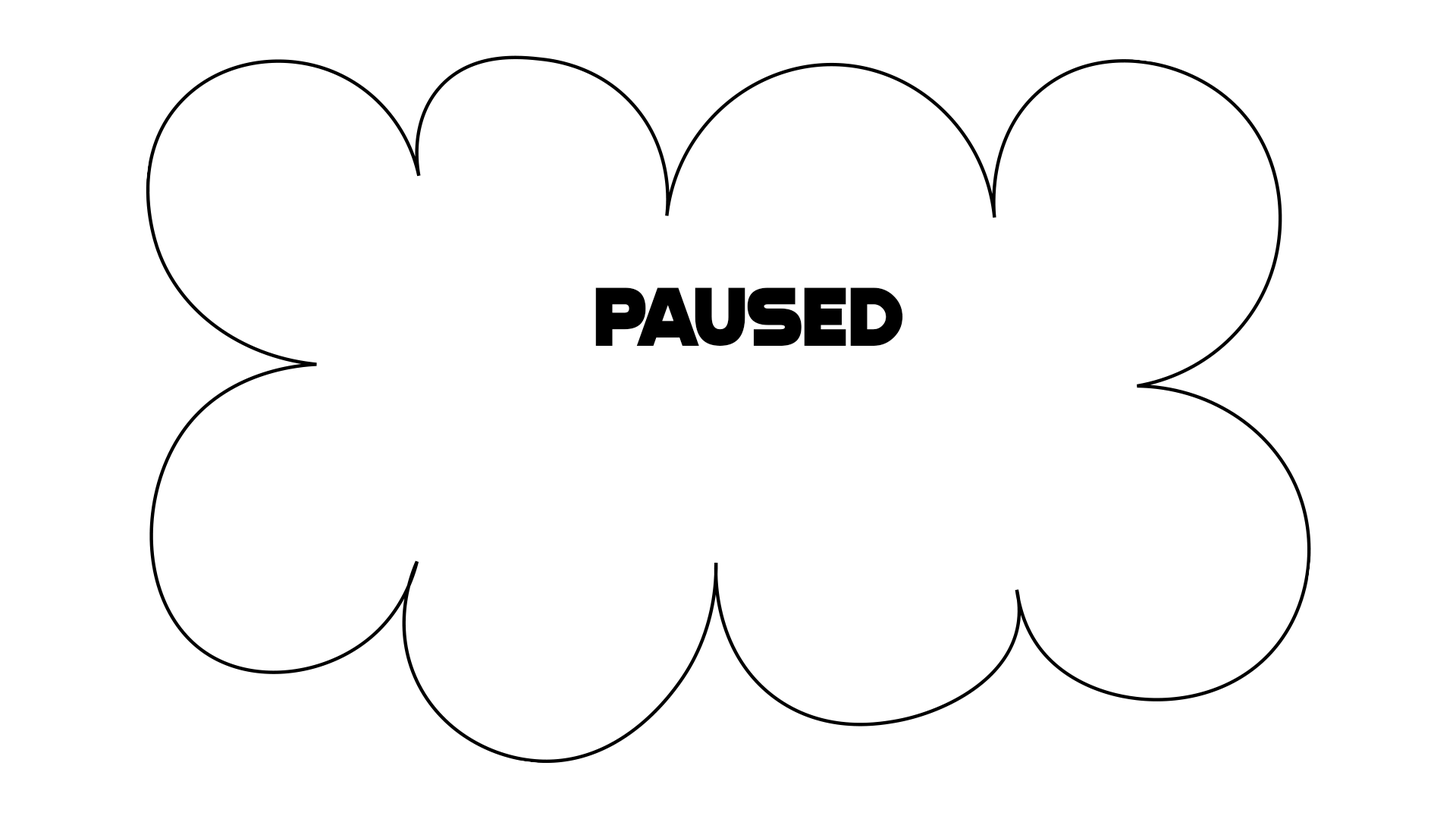
<style>
.page{position:relative;width:1456px;height:819px;background:#ffffff}
.page>*{position:absolute;margin:0}
.t1{font:84.6px "Quicksilver";color:#000000}
</style>
<div class="page">
<p class="t1" style="left:595px;top:287px;width:308px;height:59px">Paused</p>
</div>
